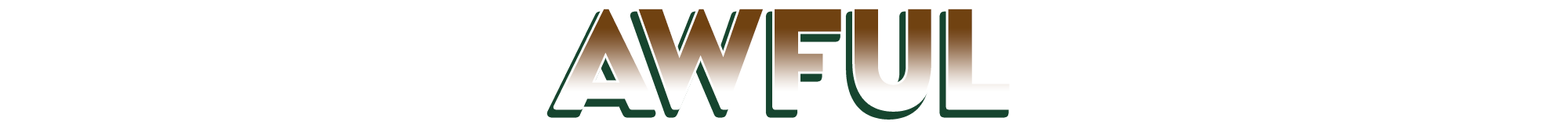
<style>
.page{position:relative;width:1568px;height:125px;background:#ffffff}
.page>*{position:absolute;margin:0}
.t1{font:138.8px "NakedPower-Bold";letter-spacing:0.04em;scale:0.85 1}
</style>
<div class="page">
<p class="t1" style="left:555px;top:9px;width:455px;height:101px">AWFUL</p>
</div>
